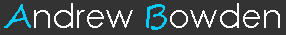
<style>
.page{position:relative;width:286px;height:35px;background:#333333}
.page>*{position:absolute;margin:0}
.t1{font:33.3px "CenturyGothic";color:#ffffff}
.t2{font:33.3px "SegoeScript";color:#00ccff}
</style>
<div class="page">
<p class="t1" style="left:4px;top:3px;width:276px;height:27px"><span class="t2">A</span>ndrew <span class="t2">B</span>owden</p>
</div>
